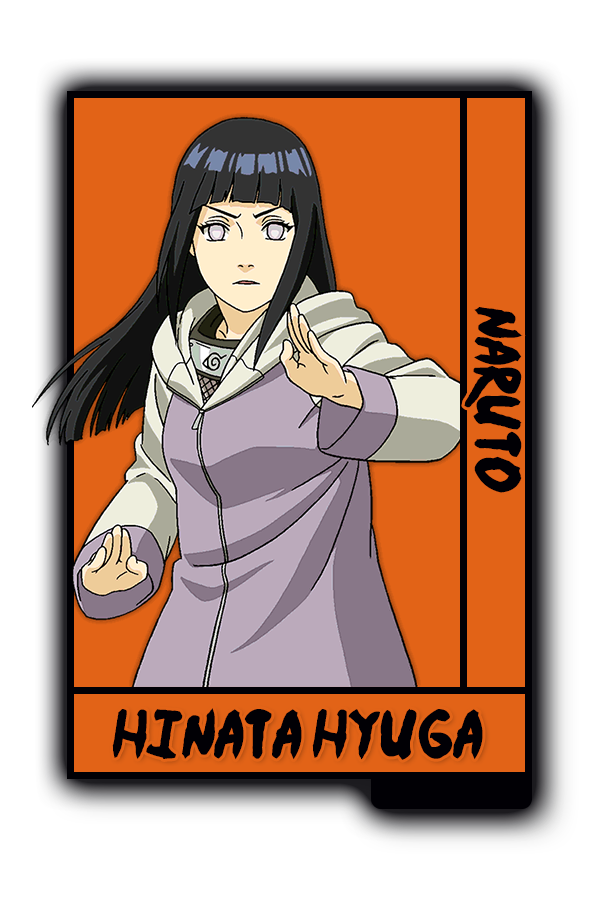
<style>
.page{position:relative;width:600px;height:900px;background:#e26317}
.page>*{position:absolute;margin:0}
.t1{font:52px "Ninja-Naruto";color:#010005}
.t2{font:55.4px "Ninja-Naruto";color:#010005}
</style>
<div class="page">
<p class="t1" style="left:464px;top:307px;width:59px;height:186px;rotate:90deg">Naruto</p>
<p class="t2" style="left:112px;top:708px;width:371px;height:52px">Hinata Hyuga</p>
</div>
